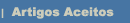
<style>
.page{position:relative;width:130px;height:23px;background:#4775a3}
.page>*{position:absolute;margin:0}
.t1{font:12px "Arial-Black";color:#cdccba}
.t2{font:10px "Arial-Black";color:#cdccba}
</style>
<div class="page">
<p class="t1" style="left:1px;top:7px;width:113px;height:12px"><span class="t2">|</span>  Artigos Aceitos</p>
</div>
